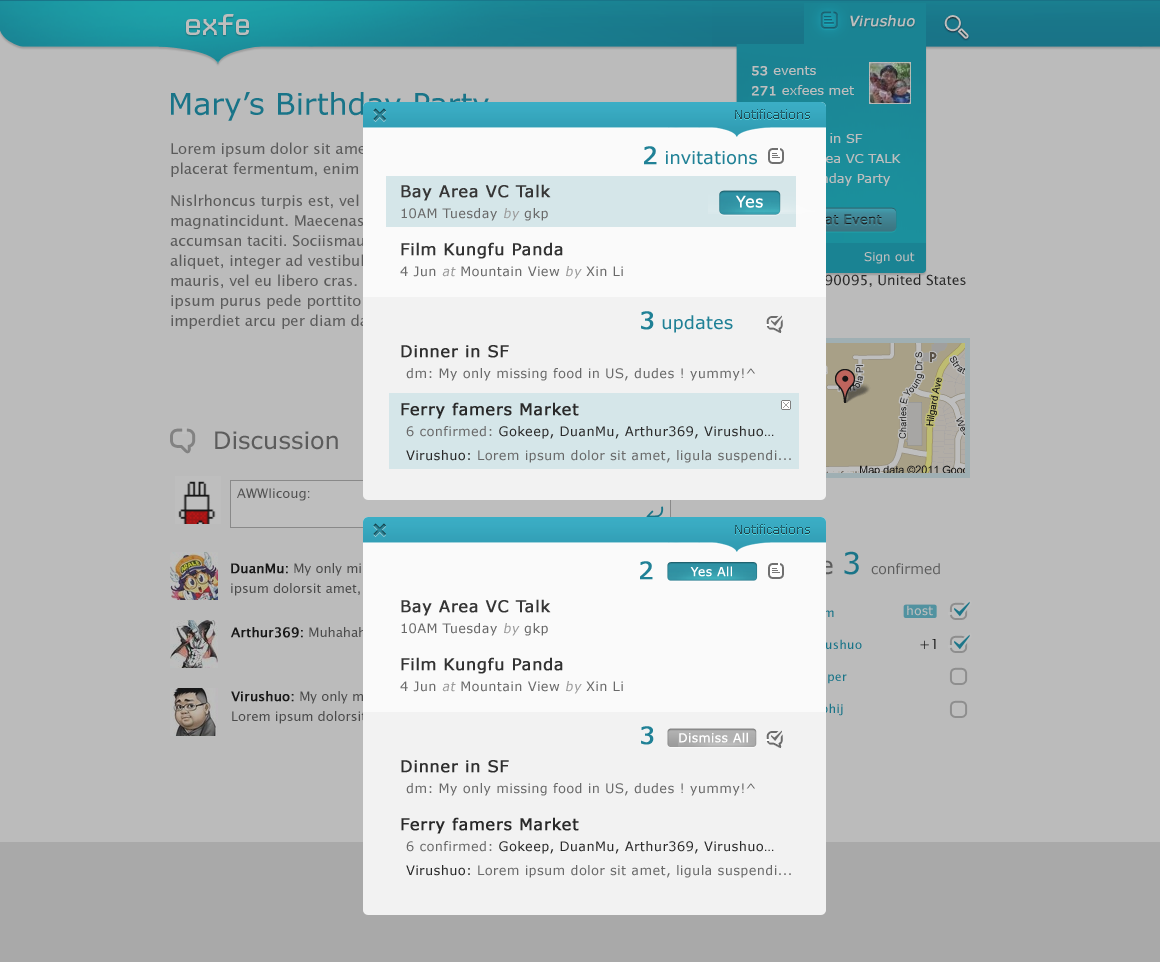
<style>
.page{position:relative;width:1160px;height:962px;background:#bbbbbb}
.page>*{position:absolute;margin:0}
.t1{font:30px "CPMono_v07Plain";letter-spacing:-0.1em;color:#bebebe}
.t2{font:14.3px "Verdana";color:#bebebe;font-weight:bold;font-style:italic}
.t3{font:30px "Verdana";color:#197488}
.t4{font:12px "Verdana";color:#23535d}
.t5{font:18px "Verdana";color:#208196}
.t6{font:24px "Verdana";color:#208196;font-weight:bold}
.t7{font:13px/24px "Verdana";letter-spacing:0.025em;color:#696969}
.t8{font:16px/24px "Verdana";letter-spacing:0.025em;color:#363636;font-weight:bold}
.t9{font:13px/24px "Verdana";letter-spacing:0.025em;color:#9c9c9c;font-style:italic}
.t10{font:16px/24px "Verdana";letter-spacing:0.025em;color:#323232;font-weight:bold}
.t11{font:16px/24px "Verdana";letter-spacing:0.025em;color:#2f2f2f;font-weight:bold}
.t12{font:16px/24px "Verdana";letter-spacing:0.025em;color:#292929;font-weight:bold}
.t13{font:13px/24px "Verdana";letter-spacing:0.025em;color:#2a2a2a}
.t14{font:13px/24px "Verdana";letter-spacing:0.025em;color:#272727}
.t15{font:16px "Verdana";letter-spacing:0.025em;color:#ffffff}
.t16{font:24px "Verdana";color:#6a6a6a}
.t17{font:13px "LucidaSansUnicode";color:#5a5a5a}
.t18{font:13px/20px "LucidaSansUnicode"}
.t19{font:13px/20px "LucidaSansUnicode";font-weight:bold}
.t20{font:12.5px "Verdana";letter-spacing:0.025em;color:#ffffff}
.t21{font:13px "LucidaSansUnicode"}
.t22{font:13px "LucidaSansUnicode";font-weight:bold}
</style>
<div class="page">
<p class="t1" style="left:186px;top:14px;width:63px;height:21px">exfe</p>
<p class="t2" style="left:850px;top:15px;width:65px;height:12px">Virushuo</p>
<p class="t3" style="left:171px;top:92px;width:318px;height:29px">Mary’s Birthday Party</p>
<p class="t4" style="left:735px;top:109px;width:75px;height:10px">Notifications</p>
<p class="t5" style="left:644px;top:146px;width:113px;height:19px"><span class="t6">2</span> invitations</p>
<p class="t7" style="left:400px;top:184px;width:391px;height:279px"><span class="t8">Bay Area VC Talk<br></span>10AM Tuesday <span class="t9">by</span> gkp<br><span class="t10">Film Kungfu Panda<br></span>4 Jun <span class="t9">at </span>Mountain View <span class="t9">by</span> Xin Li<br><br><br><span class="t11">Dinner in SF<br></span>dm: My only missing food in US, dudes ! yummy!^<br><span class="t12">Ferry famers Market<br></span>6 confirmed: <span class="t13">Gokeep, DuanMu, Arthur369, Virushuo…<br></span><span class="t14">Virushuo: </span>Lorem ipsum dolor sit amet, ligula suspendi...</p>
<p class="t15" style="left:735px;top:195px;width:28px;height:13px">Yes</p>
<p class="t5" style="left:641px;top:311px;width:92px;height:22px"><span class="t6">3</span> updates</p>
<p class="t16" style="left:215px;top:431px;width:123px;height:19px">Discussion</p>
<p class="t17" style="left:237px;top:488px;width:73px;height:13px">AWWIicoug:</p>
<p class="t4" style="left:735px;top:524px;width:75px;height:10px">Notifications</p>
<p class="t18" style="left:231px;top:563px;width:377px;height:33px"><span class="t19">DuanMu: </span>My only missing food in US, dudes! yummy Lorem ipsum dolorsit amet, ligula suspendisse nulla pretium.</p>
<p class="t6" style="left:640px;top:561px;width:13px;height:19px">2</p>
<p class="t20" style="left:690px;top:566px;width:42px;height:11px">Yes All</p>
<p class="t7" style="left:400px;top:599px;width:391px;height:279px"><span class="t8">Bay Area VC Talk<br></span>10AM Tuesday <span class="t9">by</span> gkp<br><span class="t10">Film Kungfu Panda<br></span>4 Jun <span class="t9">at </span>Mountain View <span class="t9">by</span> Xin Li<br><br><br><span class="t11">Dinner in SF<br></span>dm: My only missing food in US, dudes ! yummy!^<br><span class="t12">Ferry famers Market<br></span>6 confirmed: <span class="t13">Gokeep, DuanMu, Arthur369, Virushuo…<br></span><span class="t14">Virushuo: </span>Lorem ipsum dolor sit amet, ligula suspendi...</p>
<p class="t21" style="left:231px;top:627px;width:275px;height:13px"><span class="t22">Arthur369: </span>Muhahaha,I’ll eat an big apple !</p>
<p class="t18" style="left:231px;top:691px;width:343px;height:33px"><span class="t19">Virushuo: </span>My only missing food in US, dudes! yummy! <br>Lorem ipsum dolorsit amet, ligula suspendisse nulla .</p>
<p class="t6" style="left:641px;top:726px;width:13px;height:19px">3</p>
<p class="t20" style="left:679px;top:732px;width:69px;height:11px">Dismiss All</p>
</div>
